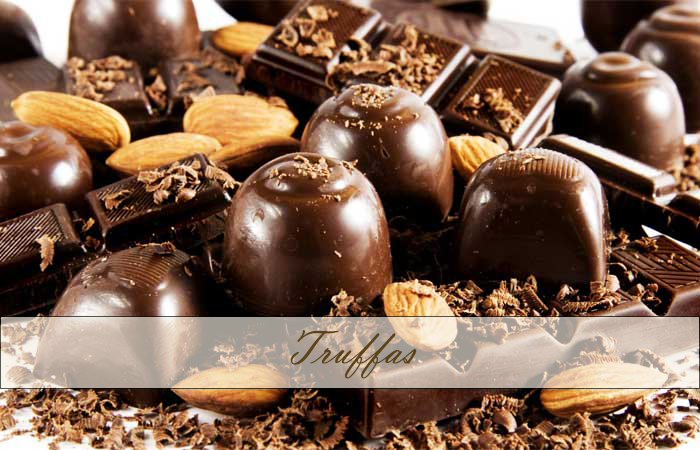
<style>
.page{position:relative;width:700px;height:450px}
.page>*{position:absolute;margin:0}
.t1{font:50px "VladimirScript";color:#5c4317}
</style>
<div class="page">
<p class="t1" style="left:290px;top:330px;width:127px;height:49px">Truffas</p>
</div>
